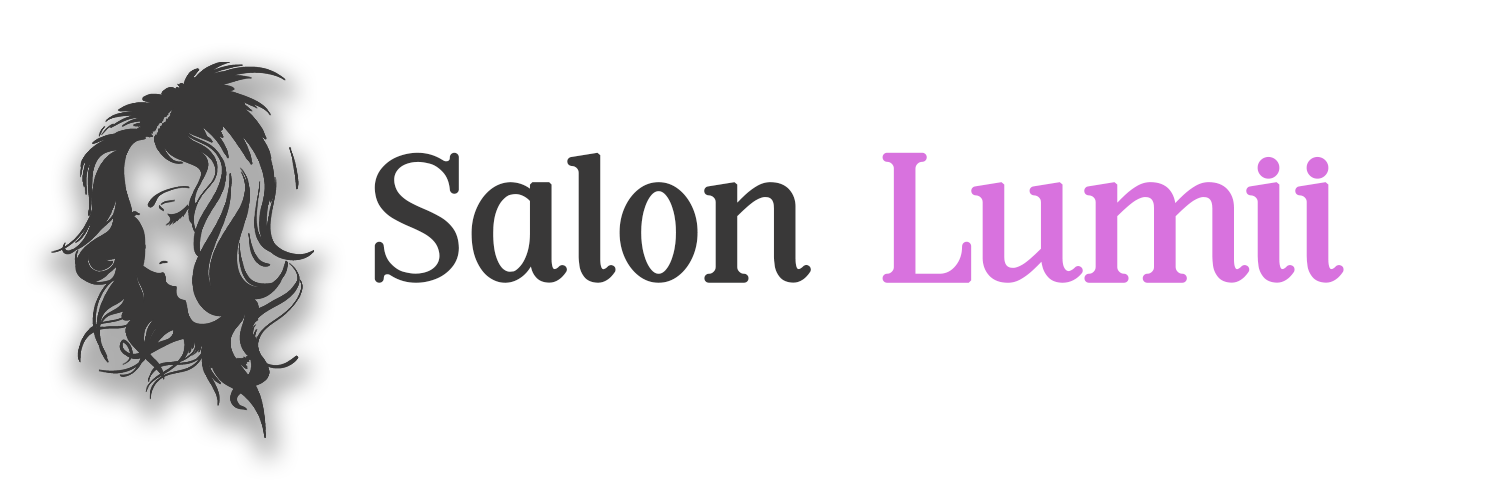
<style>
.page{position:relative;width:1500px;height:500px;background:#ffffff}
.page>*{position:absolute;margin:0}
.t1{font:179.2px "Rinnero";color:#393838;font-weight:bold}
.t2{font:179.2px "Rinnero";color:#d872de;font-weight:bold}
</style>
<div class="page">
<p class="t1" style="left:374px;top:152px;width:970px;height:131px">Salon <span class="t2">Lumii</span></p>
</div>
